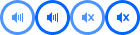
<style>
.page{position:relative;width:140px;height:35px;background:#ffffff}
.page>*{position:absolute;margin:0}
.t1{font:11px "Verdana";color:#4c94ff;font-weight:bold}
.t2{font:11px "Verdana";color:#0066ff;font-weight:bold}
</style>
<div class="page">
<p class="t1" style="left:88px;top:14px;width:7px;height:7px">x</p>
<p class="t2" style="left:123px;top:14px;width:7px;height:7px">x</p>
</div>
